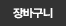
<style>
.page{position:relative;width:66px;height:26px;background:#333333}
.page>*{position:absolute;margin:0}
.t1{font:11.5px "YDIYGO350";letter-spacing:-0.05em;color:#ffffff}
</style>
<div class="page">
<p class="t1" style="left:13px;top:8px;width:40px;height:11px">장바구니</p>
</div>
